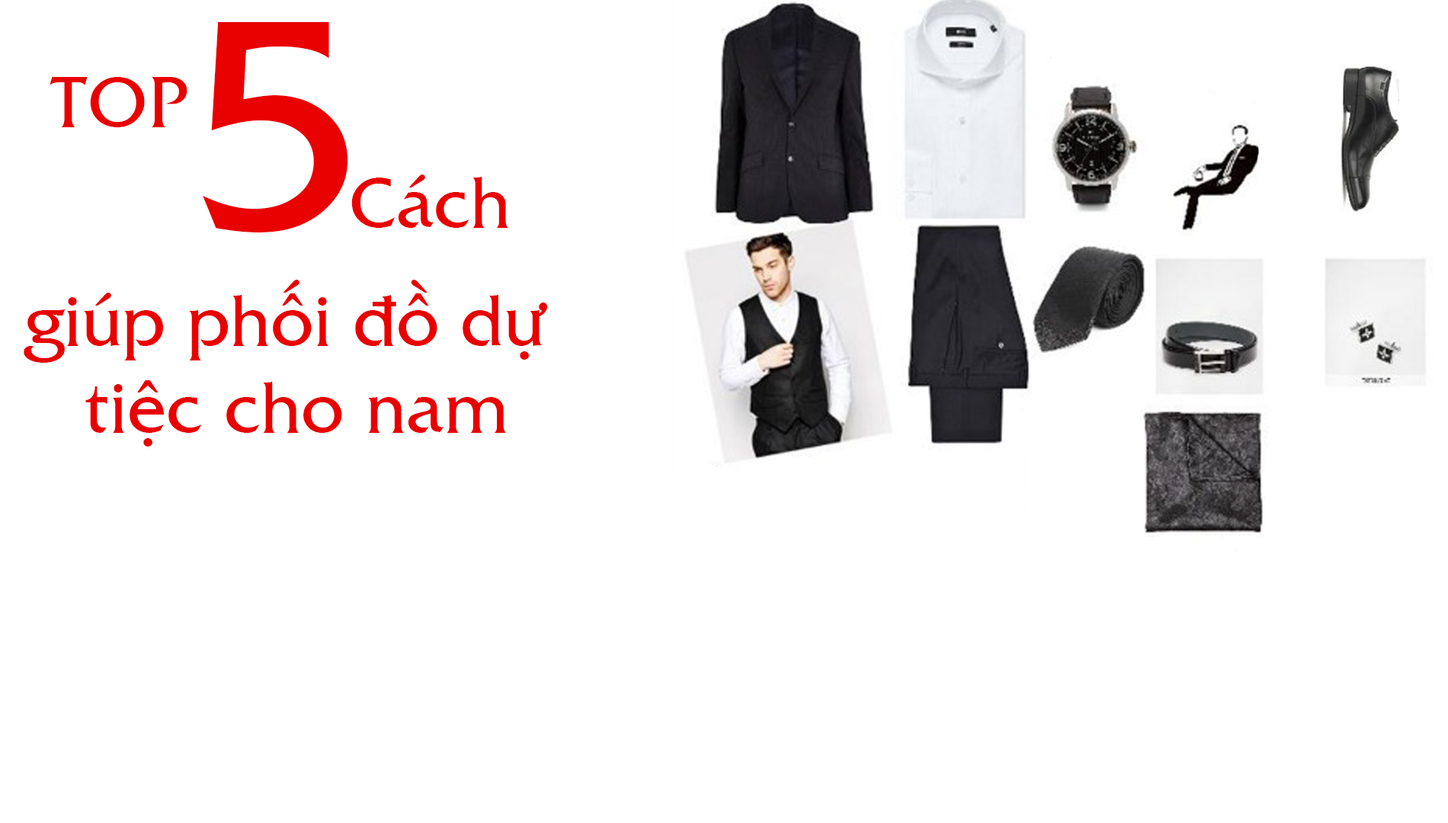
<style>
.page{position:relative;width:1448px;height:823px;background:#ffffff}
.page>*{position:absolute;margin:0}
.t1{font:305.7px "UVNLacLongQuan";color:#e90000}
.t2{font:72.4px "UVNLacLongQuan";color:#e90000}
</style>
<div class="page">
<p class="t1" style="left:203px;top:22px;width:145px;height:211px">5</p>
<p class="t2" style="left:50px;top:77px;width:138px;height:50px">TOP</p>
<p class="t2" style="left:351px;top:175px;width:157px;height:53px">Cách</p>
<p class="t2" style="left:24px;top:280px;width:523px;height:167px;text-align:center">giúp phối đồ dự<br> tiệc cho nam</p>
</div>
